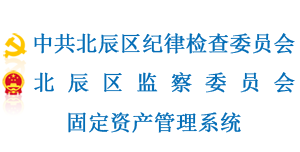
<style>
.page{position:relative;width:300px;height:152px;background:#ffffff}
.page>*{position:absolute;margin:0}
.t1{font:21.5px "SimSun";color:#056eb7;font-weight:bold}
.t2{font:21.5px "SimSun";letter-spacing:0.58em;color:#056eb7;font-weight:bold}
</style>
<div class="page">
<p class="t1" style="left:34px;top:33px;width:261px;height:21px">中共北辰区纪律检查委员会</p>
<p class="t2" style="left:34px;top:72px;width:261px;height:21px">北辰区监察委员会</p>
<p class="t1" style="left:68px;top:112px;width:173px;height:21px">固定资产管理系统</p>
</div>
